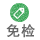
<style>
.page{position:relative;width:40px;height:40px;background:#ffffff}
.page>*{position:absolute;margin:0}
.t1{font:14px "AdobeHeitiStd-Regular";letter-spacing:0.075em;color:#666666}
</style>
<div class="page">
<p class="t1" style="left:6px;top:24px;width:29px;height:14px">免检</p>
</div>
